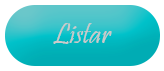
<style>
.page{position:relative;width:164px;height:71px;background:#ffffff}
.page>*{position:absolute;margin:0}
.t1{font:30px "Pristina-Regular";color:#cacaca}
</style>
<div class="page">
<p class="t1" style="left:53px;top:23px;width:59px;height:21px">Listar</p>
</div>
